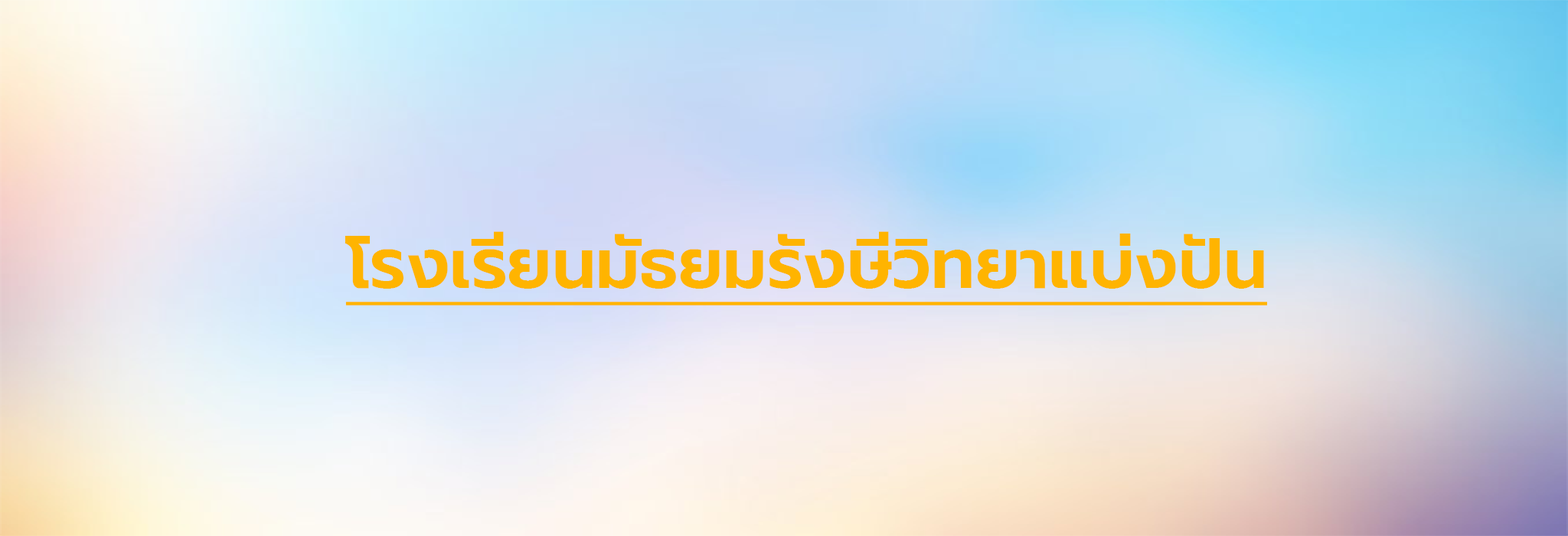
<style>
.page{position:relative;width:1568px;height:536px}
.page>*{position:absolute;margin:0}
.t1{font:68.9px "Prompt-SemiBold";color:#ffb400;text-decoration:underline}
</style>
<div class="page">
<p class="t1" style="left:345px;top:231px;width:922px;height:74px">โรงเรียนมัธยมรังษีวิทยาแบ่งปัน</p>
</div>
